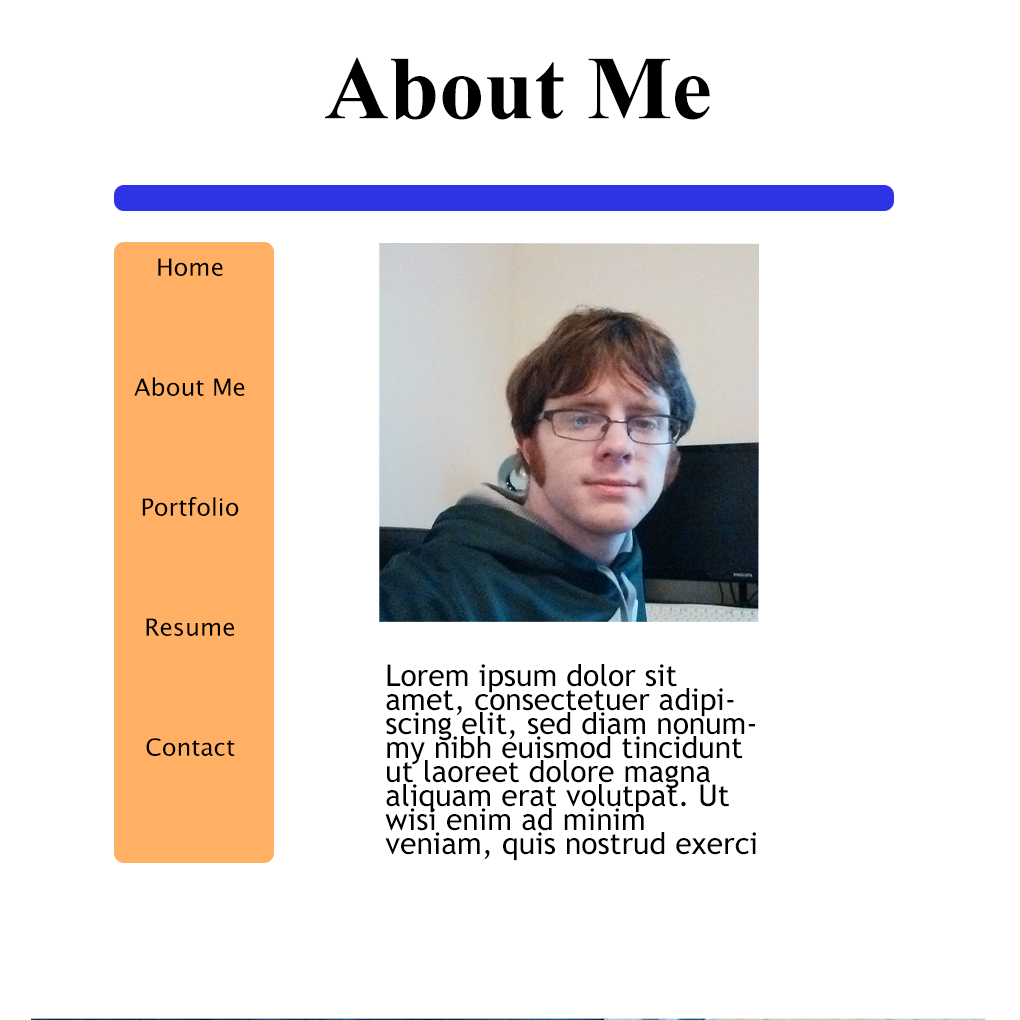
<style>
.page{position:relative;width:1020px;height:1020px;background:#ffffff}
.page>*{position:absolute;margin:0}
.t1{font:90px "TimesNewRomanPS-BoldMT";color:#000000}
.t2{font:24px/24px "LucidaSansUnicode";color:#000000}
.t3{font:30px/24px "TrebuchetMS";color:#000000}
</style>
<div class="page">
<p class="t1" style="left:325px;top:57px;width:385px;height:63px">About Me</p>
<p class="t2" style="left:134px;top:258px;width:111px;height:498px;text-align:center">Home<br><br><br><br><br>About Me<br><br><br><br><br>Portfolio<br><br><br><br><br>Resume<br><br><br><br><br>Contact</p>
<p class="t3" style="left:385px;top:664px;width:371px;height:197px">Lorem ipsum dolor sit amet, consectetuer adipiscing elit, sed diam nonummy nibh euismod tincidunt ut laoreet dolore magna aliquam erat volutpat. Ut wisi enim ad minim veniam, quis nostrud exerci tation ullamcorper suscipit lobortis nisl ut aliquip ex ea commodo consequat. Duis autem vel feugait nulla facilisi.</p>
</div>
